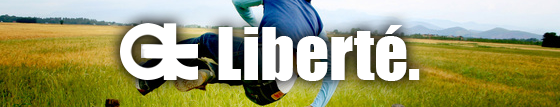
<style>
.page{position:relative;width:560px;height:107px}
.page>*{position:absolute;margin:0}
.t1{font:66.7px "Impact";color:#ffffff}
</style>
<div class="page">
<p class="t1" style="left:218px;top:25px;width:202px;height:56px">Liberté.</p>
</div>
